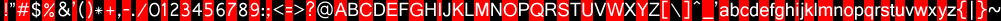
<style>
.page{position:relative;width:1001px;height:21px;background:#000000}
.page>*{position:absolute;margin:0}
.t1{font:20px "Shruti";color:#ffffff}
.t2{font:20px "Shruti";letter-spacing:-0.16em;color:#ffffff}
.t3{font:20px "Shruti";letter-spacing:-0.08em;color:#ffffff}
.t4{font:20px "Shruti";letter-spacing:0.04em;color:#ffffff}
.t5{font:20px "Shruti";letter-spacing:0.06em;color:#ffffff}
</style>
<div class="page">
<p class="t1" style="left:5px;top:0px;width:996px;height:20px">!”#$%&amp;’()*+,-./0123456789:;<span class="t2">&lt;=</span><span class="t3">&gt;?</span>@ABCDEFGHIJKLMNOPQRSTUVWXYZ[\]^_’abcdefgh<span class="t4">i</span>jklmnopqrstuvw<span class="t5">x</span>yz{|}~</p>
</div>
